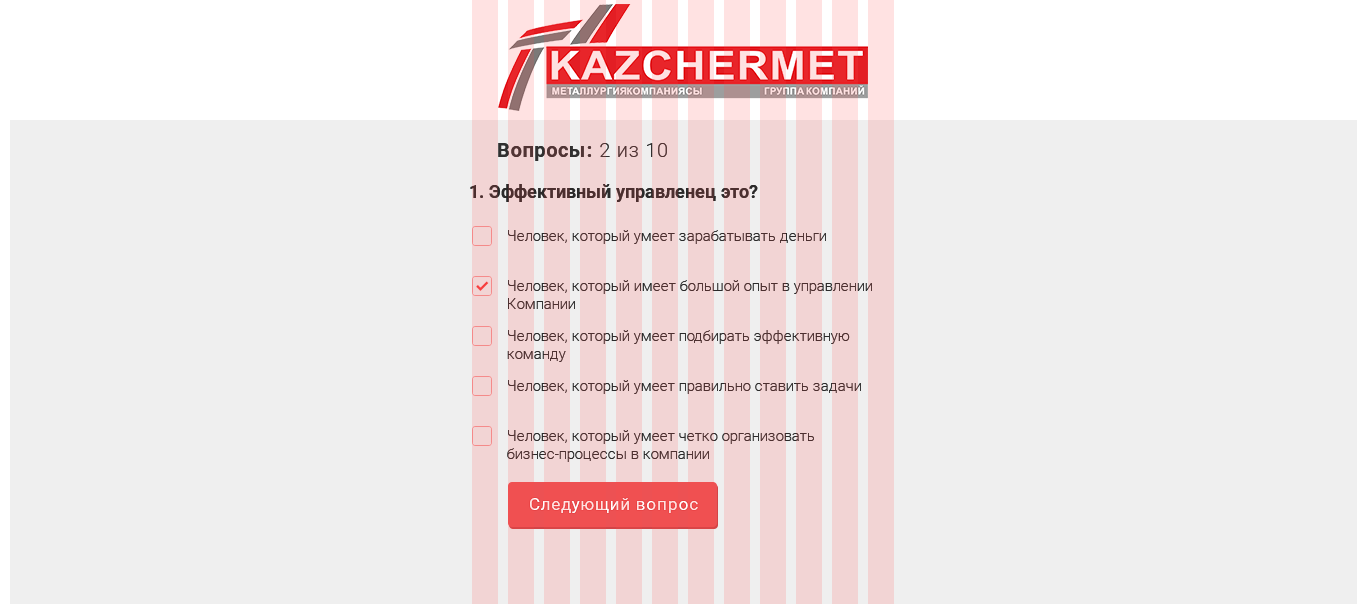
<style>
.page{position:relative;width:1367px;height:604px;background:#efefef}
.page>*{position:absolute;margin:0}
.t1{font:20px "Roboto-Bold";letter-spacing:0.04em}
.t2{font:20px "Roboto-Light";letter-spacing:0.04em}
.t3{font:15px/50px "Roboto-Light";color:#4c2f2f}
.t4{font:18px/25px "Roboto-Bold";color:#4c2f2f}
.t5{font:15px/18px "Roboto-Light";color:#4c2f2f}
.t6{font:15px "Roboto-Light";color:#4c2f2f}
.t7{font:15px/32px "Roboto-Light";color:#4c2f2f}
.t8{font:17px "Roboto-Regular";letter-spacing:0.04em}
</style>
<div class="page">
<p class="t1" style="left:498px;top:143px;width:169px;height:18px">Вопросы: <span class="t2">2 из 10</span></p>
<p class="t3" style="left:470px;top:184px;width:402px;height:278px"><span class="t4"> 1. Эффективный управленец это?  <br> <br></span><span class="t5">Человек, который умеет зарабатывать деньги<br></span>Человек, который имеет большой опыт в управлении <span class="t6">Компании<br></span><span class="t7">Человек, который умеет подбирать эффективную </span><span class="t6">команду<br></span><span class="t7">Человек, который умеет правильно ставить задачи<br></span>Человек, который умеет четко организовать <span class="t6">бизнес-процессы в компании</span></p>
<p class="t8" style="left:530px;top:498px;width:168px;height:15px">Следующий вопрос</p>
</div>
